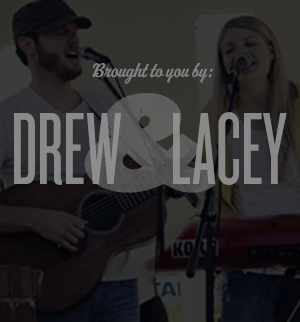
<style>
.page{position:relative;width:300px;height:322px}
.page>*{position:absolute;margin:0}
.t1{font:20px "MascotMVB";color:#808080}
.t2{font:139.4px "Knockout-HTF94-UltmtSumo";color:#5b5b5b}
.t3{font:106.4px "Knockout-HTF26-JuniorFlyweight";color:#959595}
</style>
<div class="page">
<p class="t1" style="left:92px;top:63px;width:121px;height:21px">Brought to you by:</p>
<p class="t2" style="left:84px;top:93px;width:132px;height:100px">&amp;</p>
<p class="t3" style="left:14px;top:112px;width:273px;height:73px;opacity:0.86">DREW     LACEY</p>
</div>
